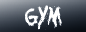
<style>
.page{position:relative;width:86px;height:32px}
.page>*{position:absolute;margin:0}
.t1{font:37.3px "YouMurdererBB";color:#ffffff;scale:0.84 1}
</style>
<div class="page">
<p class="t1" style="left:25px;top:5px;width:37px;height:25px">Gym</p>
</div>
